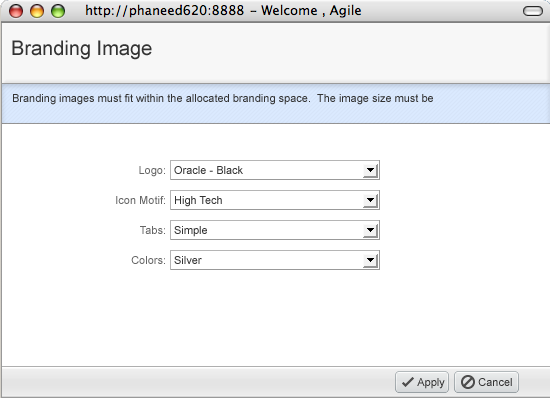
<style>
.page{position:relative;width:550px;height:398px;background:#ffffff}
.page>*{position:absolute;margin:0}
.t1{font:20px "ArialMT";color:#333333}
.t2{font:11px "ArialMT";color:#333333}
.t3{font:11px "ArialMT";color:#666666}
</style>
<div class="page">
<p class="t1" style="left:12px;top:40px;width:140px;height:20px">Branding Image</p>
<p class="t2" style="left:13px;top:94px;width:420px;height:11px">Branding images must fit within the allocated branding space.  The image size must be</p>
<p class="t3" style="left:139px;top:166px;width:26px;height:11px">Logo:</p>
<p class="t2" style="left:174px;top:166px;width:69px;height:8px">Oracle - Black</p>
<p class="t3" style="left:116px;top:196px;width:49px;height:8px">Icon Motif:</p>
<p class="t2" style="left:175px;top:196px;width:47px;height:11px">High Tech</p>
<p class="t3" style="left:140px;top:226px;width:25px;height:8px">Tabs:</p>
<p class="t2" style="left:174px;top:226px;width:33px;height:11px">Simple</p>
<p class="t3" style="left:131px;top:256px;width:34px;height:8px">Colors:</p>
<p class="t2" style="left:174px;top:256px;width:28px;height:8px">Silver</p>
<p class="t2" style="left:417px;top:378px;width:28px;height:11px">Apply</p>
<p class="t2" style="left:478px;top:378px;width:34px;height:8px">Cancel</p>
</div>
